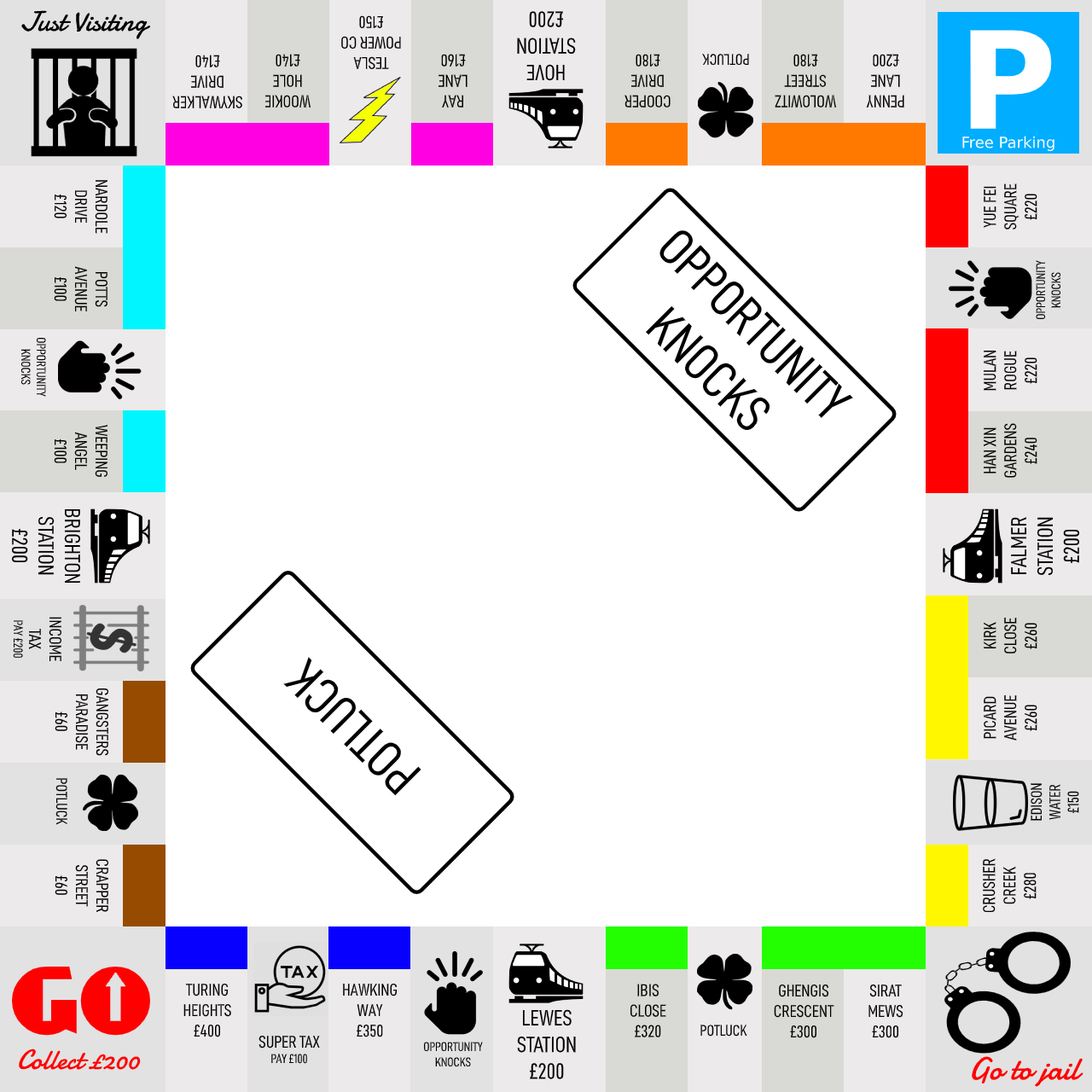
<style>
.page{position:relative;width:1092px;height:1092px;background:#ffffff}
.page>*{position:absolute;margin:0}
.t1{font:28.2px "Damion";color:#000000}
.t2{font:17.1px "D-DINCondensed";color:#000000}
.t3{font:22.2px "D-DINCondensed";color:#000000}
.t4{font:15.4px "D-DINCondensed";color:#000000}
.t5{font:52.9px "D-DINCondensed";color:#000000}
.t6{font:12.8px "D-DINCondensed";color:#000000}
.t7{font:22px "D-DINCondensed";color:#000000}
.t8{font:32.4px "Damion";color:#ff0000}
</style>
<div class="page">
<p class="t1" style="left:21px;top:10px;width:130px;height:29px">Just Visiting</p>
<p class="t2" style="left:341px;top:15px;width:60px;height:54px;text-align:center;rotate:180deg">TESLA<br>POWER CO<br>£150</p>
<p class="t3" style="left:517px;top:11px;width:59px;height:70px;text-align:center;rotate:180deg">HOVE<br>STATION<br>£200</p>
<p class="t2" style="left:264px;top:54px;width:47px;height:53px;text-align:center;rotate:180deg">WOOKIE<br>HOLE<br>£140</p>
<p class="t2" style="left:439px;top:54px;width:29px;height:53px;text-align:center;rotate:180deg">RAY<br>LANE<br>£160</p>
<p class="t2" style="left:624px;top:54px;width:47px;height:53px;text-align:center;rotate:180deg">COOPER<br>DRIVE<br>£180</p>
<p class="t4" style="left:702px;top:54px;width:47px;height:11px;rotate:-180deg">POTLUCK</p>
<p class="t2" style="left:775px;top:54px;width:62px;height:53px;text-align:center;rotate:180deg">WOLOWITZ<br>STREET<br>£180</p>
<p class="t2" style="left:866px;top:54px;width:38px;height:53px;text-align:center;rotate:180deg">PENNY<br>LANE<br>£200</p>
<p class="t2" style="left:172px;top:55px;width:70px;height:53px;text-align:center;rotate:180deg">SKYWALKER<br>DRIVE<br>£140</p>
<p class="t2" style="left:54px;top:180px;width:53px;height:54px;text-align:center;rotate:90deg">NARDOLE<br>DRIVE<br>£120</p>
<p class="t2" style="left:984px;top:183px;width:53px;height:46px;text-align:center;rotate:-90deg">YUE FEI<br>SQUARE<br>£220</p>
<p class="t5" style="left:646px;top:230px;width:207px;height:200px;text-align:center;rotate:45deg">OPPORTUNITY<br>KNOCKS</p>
<p class="t2" style="left:54px;top:266px;width:54px;height:45px;text-align:center;rotate:90deg">POTTS<br>AVENUE<br>£100</p>
<p class="t6" style="left:1036px;top:260px;width:24px;height:59px;text-align:center;rotate:-90deg">OPPORTUNITY<br>KNOCKS</p>
<p class="t6" style="left:21px;top:338px;width:25px;height:59px;text-align:center;rotate:90deg">OPPORTUNITY<br>KNOCKS</p>
<p class="t2" style="left:984px;top:351px;width:53px;height:40px;text-align:center;rotate:-90deg">MULAN<br>ROGUE<br>£220</p>
<p class="t2" style="left:54px;top:425px;width:53px;height:52px;text-align:center;rotate:90deg">WEEPING<br>ANGEL<br>£100</p>
<p class="t2" style="left:984px;top:423px;width:53px;height:55px;text-align:center;rotate:-90deg">HAN XIN<br>GARDENS<br>£240</p>
<p class="t7" style="left:12px;top:509px;width:68px;height:74px;text-align:center;rotate:90deg">BRIGHTON<br>STATION<br>£200</p>
<p class="t7" style="left:1011px;top:517px;width:69px;height:59px;text-align:center;rotate:-90deg">FALMER<br>STATION<br>£200</p>
<p class="t2" style="left:13px;top:617px;width:48px;height:44px;text-align:center;rotate:90deg">INCOME<br>TAX<br><span class="t6">PAY £200</span></p>
<p class="t2" style="left:984px;top:618px;width:53px;height:35px;text-align:center;rotate:-90deg">KIRK<br>CLOSE<br>£260</p>
<p class="t5" style="left:283px;top:657px;width:138px;height:139px;rotate:-135deg">POTLUCK</p>
<p class="t2" style="left:55px;top:688px;width:54px;height:68px;text-align:center;rotate:90deg">GANGSTERS<br>PARADISE<br>£60</p>
<p class="t2" style="left:984px;top:695px;width:53px;height:46px;text-align:center;rotate:-90deg">PICARD<br>AVENUE<br>£260</p>
<p class="t4" style="left:55px;top:778px;width:12px;height:47px;rotate:90deg">POTLUCK</p>
<p class="t4" style="left:1031px;top:783px;width:48px;height:38px;text-align:center;rotate:-90deg">EDISON<br>WATER<br>£150</p>
<p class="t2" style="left:55px;top:859px;width:53px;height:53px;text-align:center;rotate:90deg">CRAPPER<br>STREET<br>£60</p>
<p class="t2" style="left:983px;top:858px;width:54px;height:55px;text-align:center;rotate:-90deg">CRUSHER<br>CREEK<br>£280</p>
<p class="t2" style="left:183px;top:984px;width:48px;height:53px;text-align:center">TURING<br>HEIGHTS<br>£400</p>
<p class="t2" style="left:343px;top:984px;width:54px;height:53px;text-align:center">HAWKING<br>WAY<br>£350</p>
<p class="t2" style="left:630px;top:984px;width:36px;height:53px;text-align:center">IBIS<br>CLOSE<br>£320</p>
<p class="t2" style="left:774px;top:984px;width:60px;height:54px;text-align:center">GHENGIS<br>CRESCENT<br>£300</p>
<p class="t2" style="left:868px;top:984px;width:35px;height:54px;text-align:center">SIRAT<br>MEWS<br>£300</p>
<p class="t3" style="left:517px;top:1009px;width:59px;height:70px;text-align:center">LEWES<br>STATION<br>£200</p>
<p class="t4" style="left:700px;top:1025px;width:47px;height:12px">POTLUCK</p>
<p class="t2" style="left:258px;top:1035px;width:62px;height:29px;text-align:center">SUPER TAX<br><span class="t6">PAY £100</span></p>
<p class="t6" style="left:424px;top:1042px;width:59px;height:24px;text-align:center">OPPORTUNITY<br>KNOCKS</p>
<p class="t8" style="left:972px;top:1056px;width:111px;height:31px">Go to jail</p>
</div>
